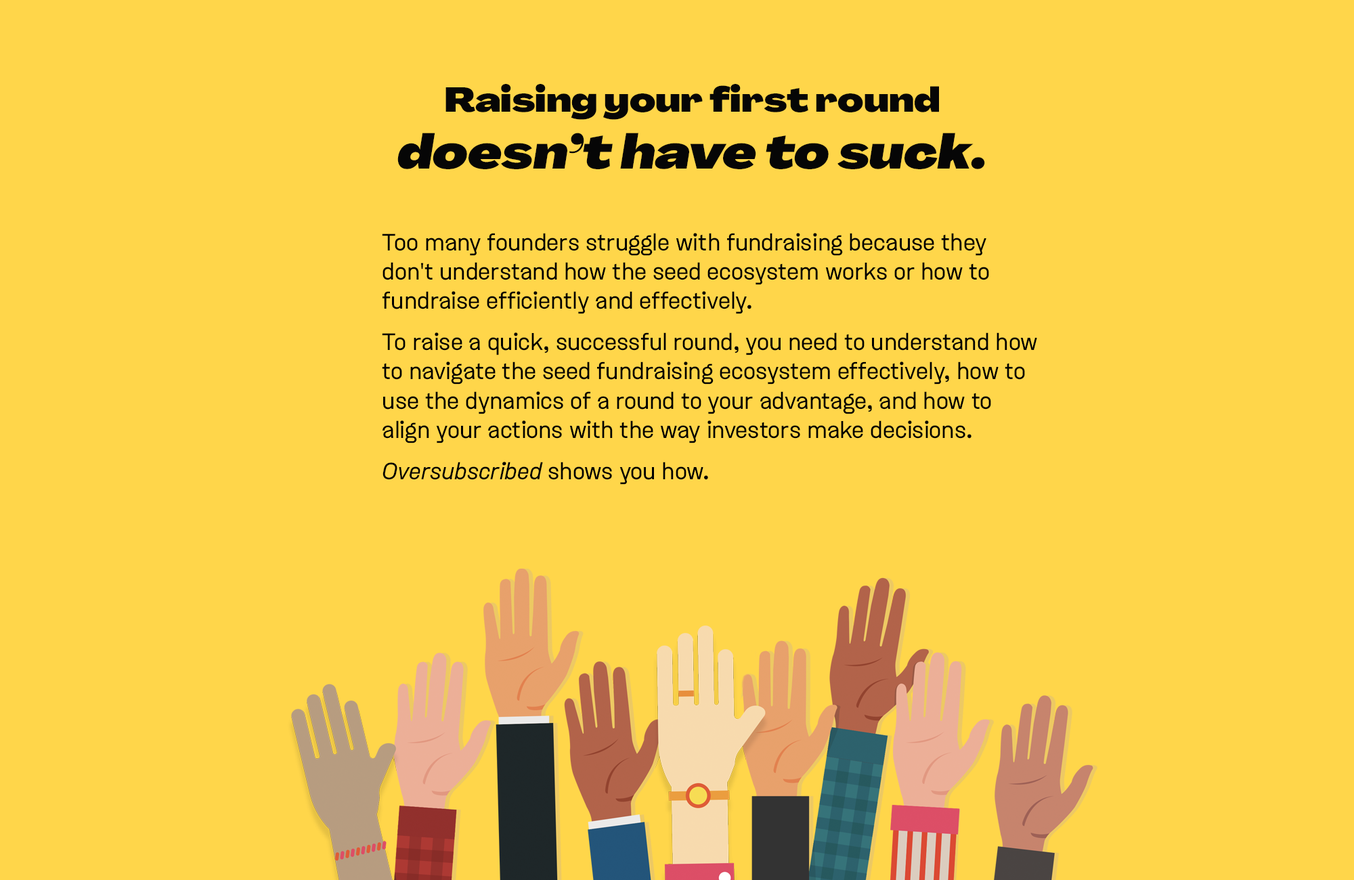
<style>
.page{position:relative;width:1354px;height:880px;background:#ffd64a}
.page>*{position:absolute;margin:0}
.t1{font:33.9px "Agrandir-WideBlack";color:#060606}
.t2{font:47.4px "Agrandir-WideBlackItalic";color:#060606}
.t3{font:24.4px "Dwight_Trial-Regular";color:#000000}
.t4{font:24.4px "MyriadPro-Regular";color:#000000}
.t5{font:24.4px "Dwight_Trial-RegularItalic";color:#000000}
</style>
<div class="page">
<p class="t1" style="left:398px;top:84px;width:587px;height:85px;text-align:center">Raising your first round<br><span class="t2">doesn’t have to suck.</span></p>
<p class="t3" style="left:382px;top:233px;width:656px;height:252px">Too many founders struggle with fundraising because they don<span class="t4">'</span>t understand how the seed ecosystem works or how to fundraise efficiently and effectively.<br>To raise a quick, successful round, you need to understand how to navigate the seed fundraising ecosystem effectively, how to use the dynamics of a round to your advantage, and how to align your actions with the way investors make decisions.<br><span class="t5">Oversubscribed </span>shows you how.</p>
</div>
